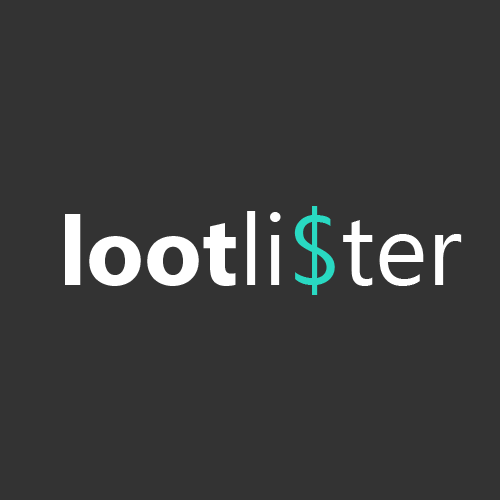
<style>
.page{position:relative;width:500px;height:500px;background:#333333}
.page>*{position:absolute;margin:0}
.t1{font:100px "MyriadPro-Bold";color:#ffffff}
.t2{font:100px "Ebrima";color:#ffffff}
.t3{font:100px "Ebrima";color:#29d9c2}
</style>
<div class="page">
<p class="t1" style="left:65px;top:206px;width:397px;height:89px">loot<span class="t2">li</span><span class="t3">$</span><span class="t2">ter</span></p>
</div>
